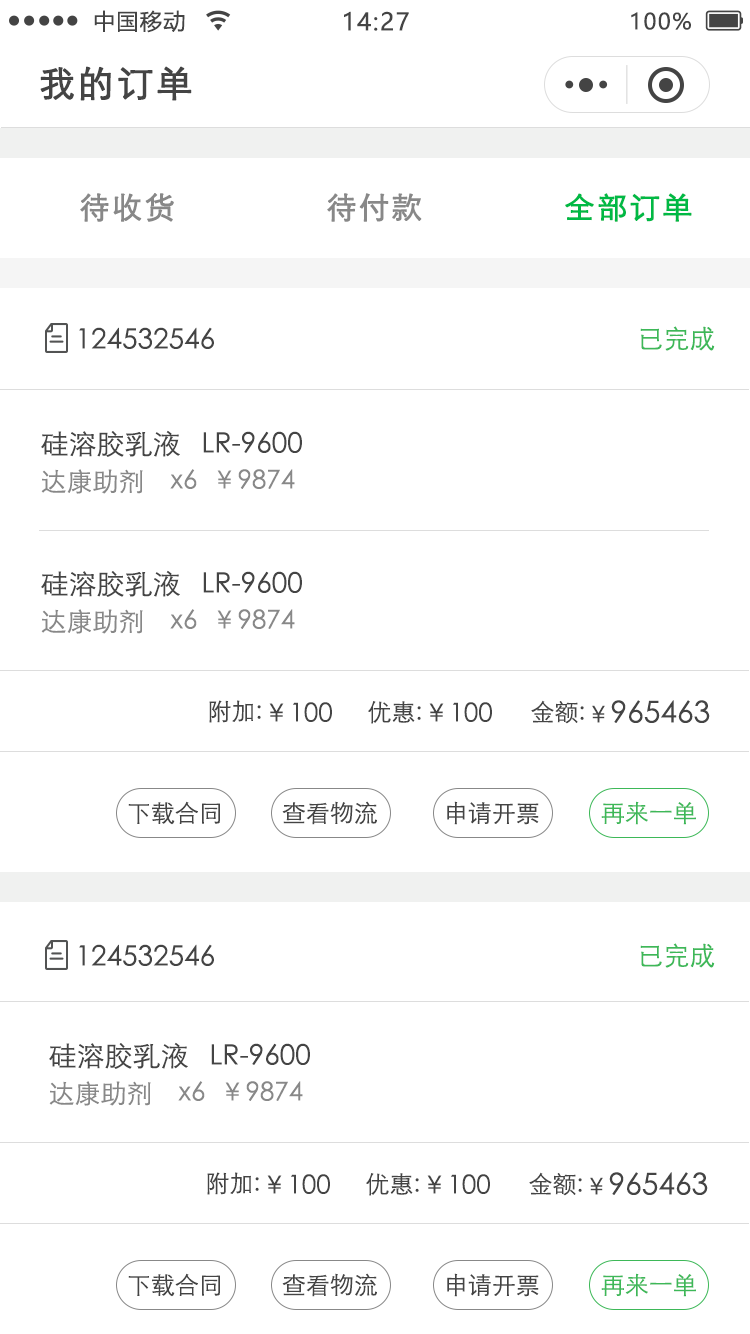
<style>
.page{position:relative;width:750px;height:1334px;background:#ffffff}
.page>*{position:absolute;margin:0}
.t1{font:22px "MicrosoftYaHei";letter-spacing:0.06em;color:#444444}
.t2{font:24px "MicrosoftYaHei";letter-spacing:0.06em;color:#444444}
.t3{font:36px "STXihei";letter-spacing:0.06em;color:#444444;font-weight:bold}
.t4{font:30px "STXihei";letter-spacing:0.06em;color:#888888;font-weight:bold}
.t5{font:30px "STXihei";letter-spacing:0.06em;color:#00b945;font-weight:bold}
.t6{font:28px "STXihei";color:#444444}
.t7{font:26px "STXihei";color:#3db858}
.t8{font:26px "STXihei";color:#888888}
.t9{font:24px "STXihei";color:#444444}
.t10{font:26px "STXihei";color:#444444}
.t11{font:30px "STXihei";color:#444444}
.t12{font:24px "STXihei";color:#3db858}
</style>
<div class="page">
<p class="t1" style="left:94px;top:10px;width:91px;height:23px">中国移动</p>
<p class="t2" style="left:344px;top:11px;width:65px;height:20px">14:27</p>
<p class="t1" style="left:631px;top:12px;width:60px;height:18px">100%</p>
<p class="t3" style="left:40px;top:66px;width:152px;height:35px">我的订单</p>
<p class="t4" style="left:80px;top:193px;width:94px;height:29px">待收货</p>
<p class="t4" style="left:327px;top:193px;width:95px;height:29px">待付款</p>
<p class="t5" style="left:565px;top:193px;width:127px;height:29px">全部订单</p>
<p class="t6" style="left:79px;top:327px;width:135px;height:22px">124532546</p>
<p class="t7" style="left:640px;top:326px;width:75px;height:25px">已完成</p>
<p class="t6" style="left:41px;top:430px;width:261px;height:27px">硅溶胶乳液   LR-9600</p>
<p class="t8" style="left:41px;top:469px;width:102px;height:25px">达康助剂</p>
<p class="t8" style="left:170px;top:469px;width:27px;height:20px">x6</p>
<p class="t8" style="left:217px;top:469px;width:78px;height:20px">￥9874</p>
<p class="t6" style="left:41px;top:570px;width:261px;height:27px">硅溶胶乳液   LR-9600</p>
<p class="t8" style="left:41px;top:609px;width:102px;height:25px">达康助剂</p>
<p class="t8" style="left:170px;top:609px;width:27px;height:20px">x6</p>
<p class="t8" style="left:217px;top:609px;width:78px;height:20px">￥9874</p>
<p class="t9" style="left:209px;top:700px;width:52px;height:23px">附加:</p>
<p class="t10" style="left:269px;top:702px;width:63px;height:20px">￥100</p>
<p class="t9" style="left:368px;top:701px;width:53px;height:23px">优惠:</p>
<p class="t10" style="left:429px;top:702px;width:63px;height:20px">￥100</p>
<p class="t9" style="left:531px;top:700px;width:53px;height:24px">金额:</p>
<p class="t11" style="left:592px;top:700px;width:118px;height:23px"><span class="t9">￥</span>965463</p>
<p class="t9" style="left:128px;top:801px;width:92px;height:24px">下载合同</p>
<p class="t9" style="left:282px;top:801px;width:95px;height:24px">查看物流</p>
<p class="t9" style="left:447px;top:801px;width:92px;height:24px">申请开票</p>
<p class="t12" style="left:601px;top:801px;width:95px;height:24px">再来一单</p>
<p class="t6" style="left:79px;top:944px;width:135px;height:22px">124532546</p>
<p class="t7" style="left:640px;top:943px;width:75px;height:25px">已完成</p>
<p class="t6" style="left:49px;top:1042px;width:261px;height:27px">硅溶胶乳液   LR-9600</p>
<p class="t8" style="left:49px;top:1081px;width:102px;height:25px">达康助剂</p>
<p class="t8" style="left:178px;top:1081px;width:27px;height:20px">x6</p>
<p class="t8" style="left:225px;top:1081px;width:78px;height:20px">￥9874</p>
<p class="t9" style="left:207px;top:1172px;width:52px;height:23px">附加:</p>
<p class="t10" style="left:267px;top:1174px;width:63px;height:20px">￥100</p>
<p class="t9" style="left:366px;top:1173px;width:53px;height:23px">优惠:</p>
<p class="t10" style="left:427px;top:1174px;width:63px;height:20px">￥100</p>
<p class="t9" style="left:529px;top:1172px;width:53px;height:24px">金额:</p>
<p class="t11" style="left:590px;top:1172px;width:118px;height:23px"><span class="t9">￥</span>965463</p>
<p class="t9" style="left:128px;top:1273px;width:92px;height:24px">下载合同</p>
<p class="t9" style="left:282px;top:1273px;width:95px;height:24px">查看物流</p>
<p class="t9" style="left:447px;top:1273px;width:92px;height:24px">申请开票</p>
<p class="t12" style="left:601px;top:1273px;width:95px;height:24px">再来一单</p>
</div>
